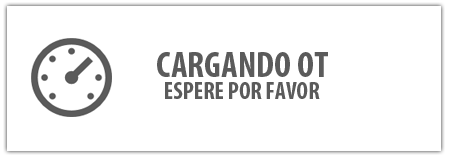
<style>
.page{position:relative;width:449px;height:158px;background:#ffffff}
.page>*{position:absolute;margin:0}
.t1{font:36px "MyriadPro-BoldCond";color:#5b5b5b}
.t2{font:24px "MyriadPro-BoldCond";color:#5b5b5b}
</style>
<div class="page">
<p class="t1" style="left:157px;top:52px;width:171px;height:25px">CARGANDO OT</p>
<p class="t2" style="left:165px;top:82px;width:155px;height:17px">ESPERE POR FAVOR</p>
</div>
